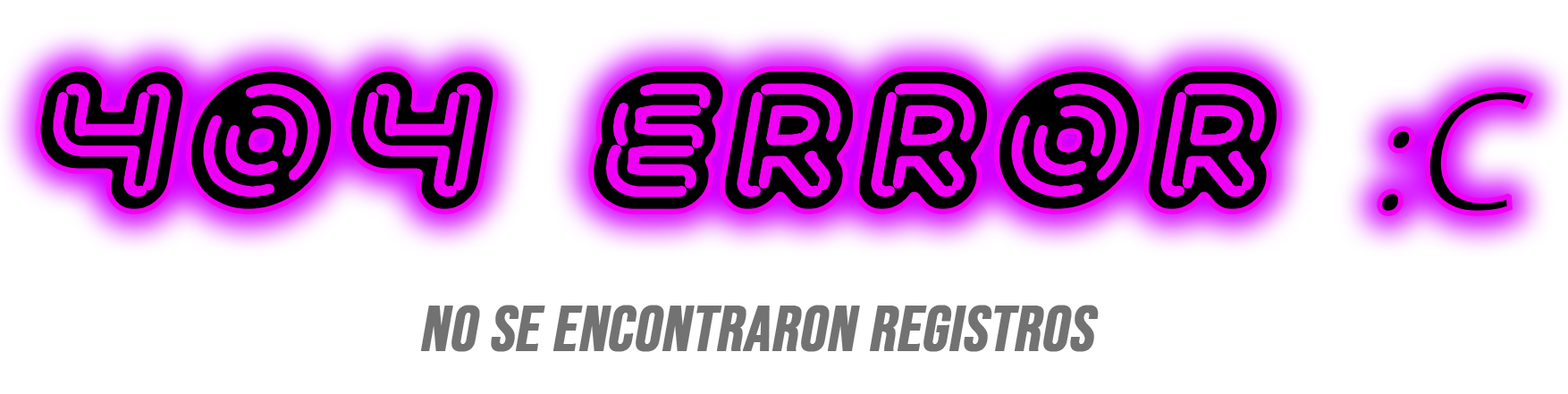
<style>
.page{position:relative;width:1568px;height:394px;background:#ffffff}
.page>*{position:absolute;margin:0}
.t1{font:178.8px "Automania";font-weight:bold;font-style:italic}
.t2{font:178.8px "MyriadPro-Regular";font-weight:bold;font-style:italic}
.t3{font:64.4px "BebasNeue-Regular";color:#737272;font-weight:bold;font-style:italic}
</style>
<div class="page">
<p class="t1" style="left:35px;top:66px;width:1499px;height:150px">404 ErroR <span class="t2">:C</span></p>
<p class="t3" style="left:421px;top:305px;width:678px;height:47px">NO SE ENCONTRARON REGISTROS</p>
</div>
